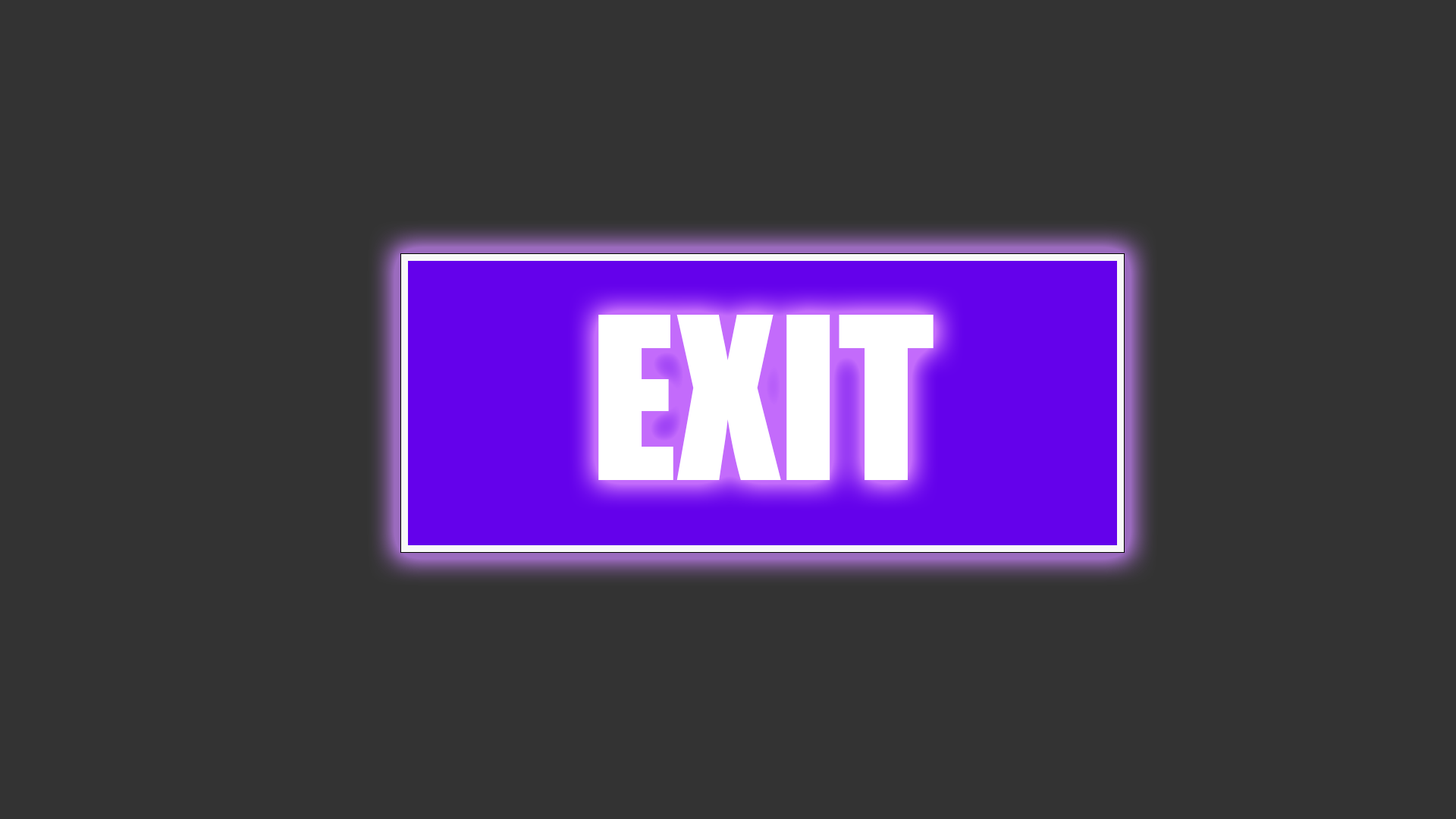
<style>
.page{position:relative;width:1456px;height:819px;background:#333333}
.page>*{position:absolute;margin:0}
.t1{font:209.2px "Impact";color:#ffffff}
</style>
<div class="page">
<p class="t1" style="left:598px;top:315px;width:335px;height:165px">EXIT</p>
</div>
